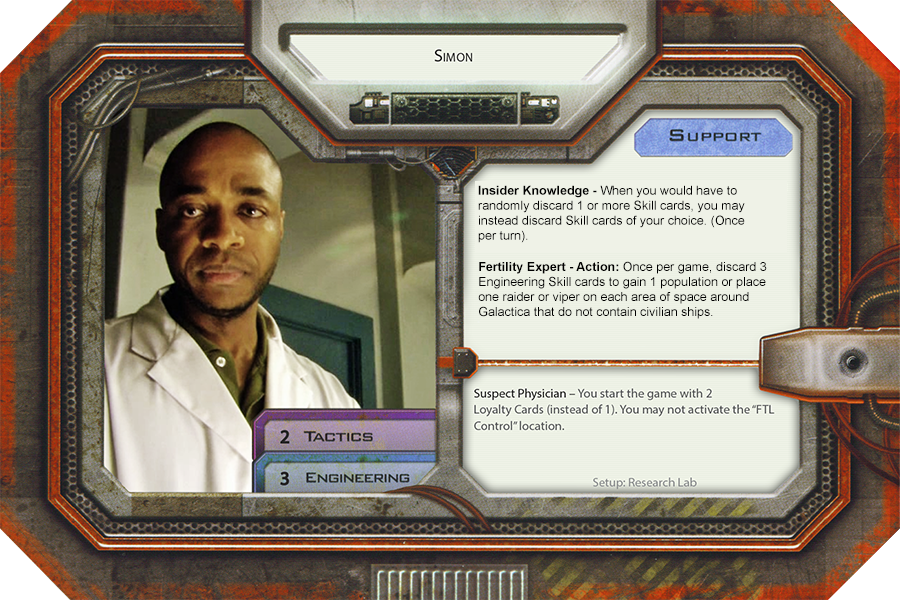
<style>
.page{position:relative;width:900px;height:600px}
.page>*{position:absolute;margin:0}
.t1{font:12.5px "ArialMT";color:#000000}
.t2{font:12.5px "Arial-BoldMT";color:#000000}
</style>
<div class="page">
<p class="t1" style="left:478px;top:185px;width:267px;height:58px"><span class="t2">Insider Knowledge -</span> When you would have to <br>randomly discard 1 or more Skill cards, you may <br>instead discard Skill cards of your choice. (Once <br>per turn).</p>
<p class="t1" style="left:478px;top:261px;width:289px;height:58px"><span class="t2">Fertility Expert - Action:</span> Once per game, discard 3 <br>Engineering Skill cards to gain 1 population or place <br>one raider or viper on each area of space around <br>Galactica that do not contain civilian ships.</p>
</div>
